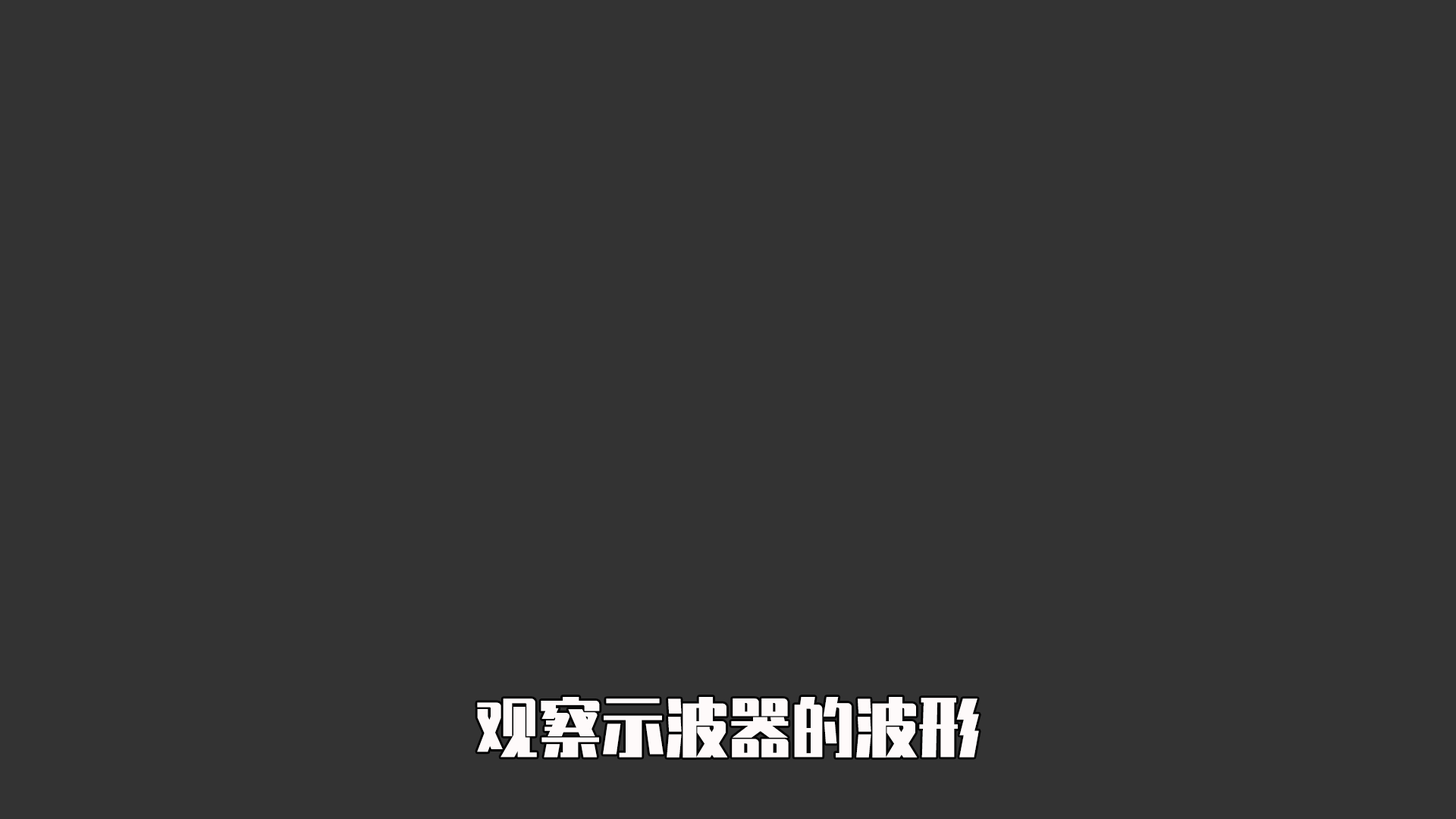
<style>
.page{position:relative;width:1456px;height:819px;background:#333333}
.page>*{position:absolute;margin:0}
.t1{font:63.2px "ZhenyanGB-Regular";color:#fefafa}
</style>
<div class="page">
<p class="t1" style="left:477px;top:697px;width:502px;height:61px">观察示波器的波形</p>
</div>
